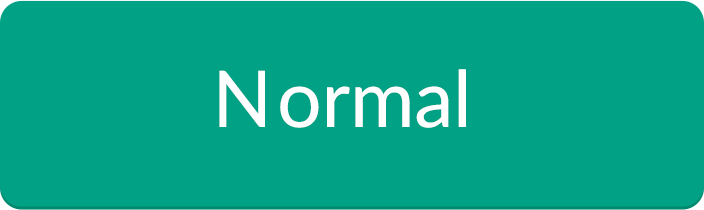
<style>
.page{position:relative;width:704px;height:210px;background:#00a185}
.page>*{position:absolute;margin:0}
.t1{font:78.2px "Lato-Regular";color:#ffffff}
.t2{font:78.2px "Lato-Regular";letter-spacing:0.08em;color:#ffffff}
</style>
<div class="page">
<p class="t1" style="left:219px;top:69px;width:247px;height:59px"><span class="t2">N</span>ormal</p>
</div>
